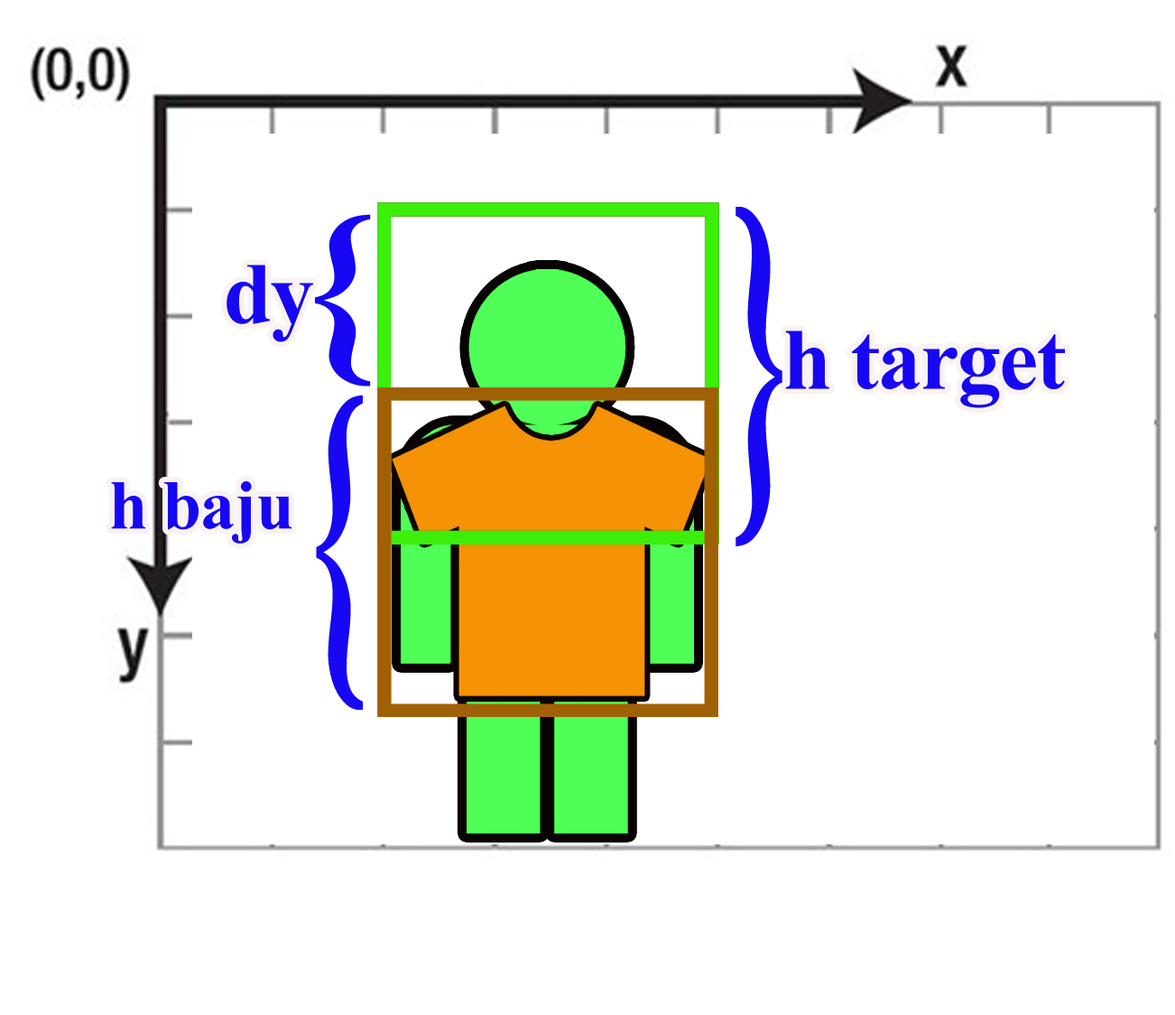
<style>
.page{position:relative;width:1175px;height:1015px;background:#ffffff}
.page>*{position:absolute;margin:0}
.t1{font:385.7px "TimesNewRomanPS-BoldMT";letter-spacing:-0.017em;color:#1707f3;scale:0.44 1}
.t2{font:194.5px "TimesNewRomanPS-BoldMT";letter-spacing:-0.017em;color:#1707f3;scale:1.04 1}
.t3{font:87.2px "TimesNewRomanPS-BoldMT";letter-spacing:-0.017em;color:#1707f3}
.t4{font:357.2px "TimesNewRomanPS-BoldMT";letter-spacing:-0.017em;color:#1707f3;scale:0.48 1}
.t5{font:69.6px "TimesNewRomanPS-BoldMT";letter-spacing:-0.017em;color:#1707f3}
</style>
<div class="page">
<p class="t1" style="left:736px;top:207px;width:47px;height:339px">}</p>
<p class="t2" style="left:315px;top:214px;width:56px;height:172px;rotate:-180deg">}</p>
<p class="t3" style="left:227px;top:264px;width:86px;height:78px">dy</p>
<p class="t3" style="left:785px;top:330px;width:280px;height:78px">h target</p>
<p class="t4" style="left:316px;top:394px;width:47px;height:315px;rotate:-180deg">}</p>
<p class="t5" style="left:111px;top:481px;width:181px;height:62px">h baju</p>
</div>
